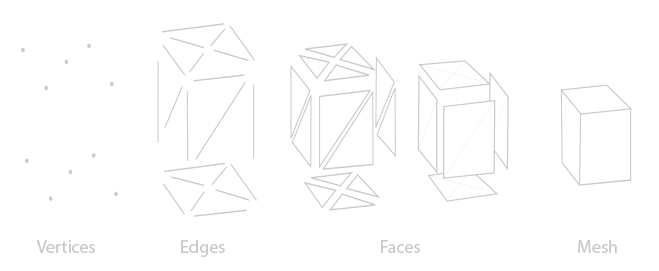
<style>
.page{position:relative;width:659px;height:271px;background:#ffffff}
.page>*{position:absolute;margin:0}
.t1{font:18px "MyriadPro-Regular";color:#c9c9c9}
</style>
<div class="page">
<p class="t1" style="left:36px;top:240px;width:59px;height:13px">Vertices</p>
<p class="t1" style="left:181px;top:240px;width:44px;height:17px">Edges</p>
<p class="t1" style="left:381px;top:240px;width:39px;height:13px">Faces</p>
<p class="t1" style="left:578px;top:240px;width:39px;height:13px">Mesh</p>
</div>
